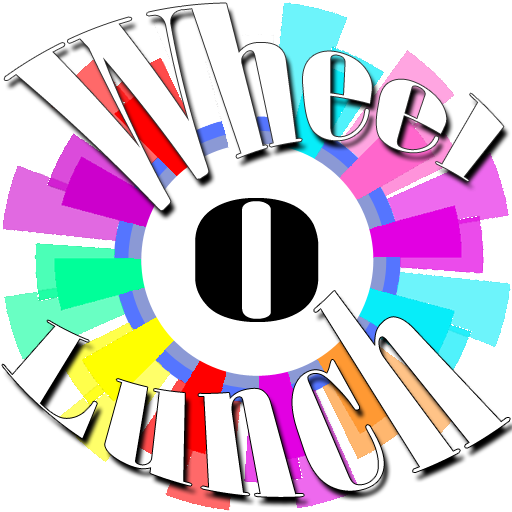
<style>
.page{position:relative;width:512px;height:512px;background:#ffffff}
.page>*{position:absolute;margin:0}
.t1{font:185px "Onyx";color:#ffffff}
.t2{font:166.7px "Onyx";color:#000000;scale:2.72 1}
.t3{font:191.7px "Onyx";color:#ffffff}
</style>
<div class="page">
<p class="t1" style="left:4px;top:3px;width:500px;height:208px">Wheel</p>
<p class="t2" style="left:195px;top:198px;width:124px;height:124px">O</p>
<p class="t3" style="left:2px;top:291px;width:508px;height:206px">Lunch</p>
</div>
